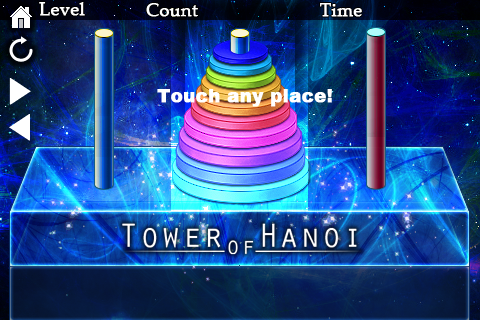
<style>
.page{position:relative;width:480px;height:320px}
.page>*{position:absolute;margin:0}
.t1{font:18px "PalatinoLinotype-Roman";color:#ffffff;font-weight:bold}
.t2{font:30px "AppleGothic";color:#ffffff;font-weight:bold}
.t3{font:18px "Arial-Black";color:#ffffff;font-weight:bold}
</style>
<div class="page">
<p class="t1" style="left:39px;top:2px;width:46px;height:14px">Level</p>
<p class="t1" style="left:146px;top:3px;width:52px;height:14px">Count</p>
<p class="t1" style="left:320px;top:3px;width:42px;height:14px">Time</p>
<p class="t2" style="left:9px;top:78px;width:22px;height:63px;text-align:center">▶<br>◀</p>
<p class="t3" style="left:157px;top:89px;width:175px;height:18px">Touch any place!</p>
</div>
